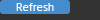
<style>
.page{position:relative;width:100px;height:20px;background:#333333}
.page>*{position:absolute;margin:0}
.t1{font:12px "Hind-Regular";color:#ffffff}
</style>
<div class="page">
<p class="t1" style="left:16px;top:3px;width:38px;height:8px">Refresh</p>
</div>
